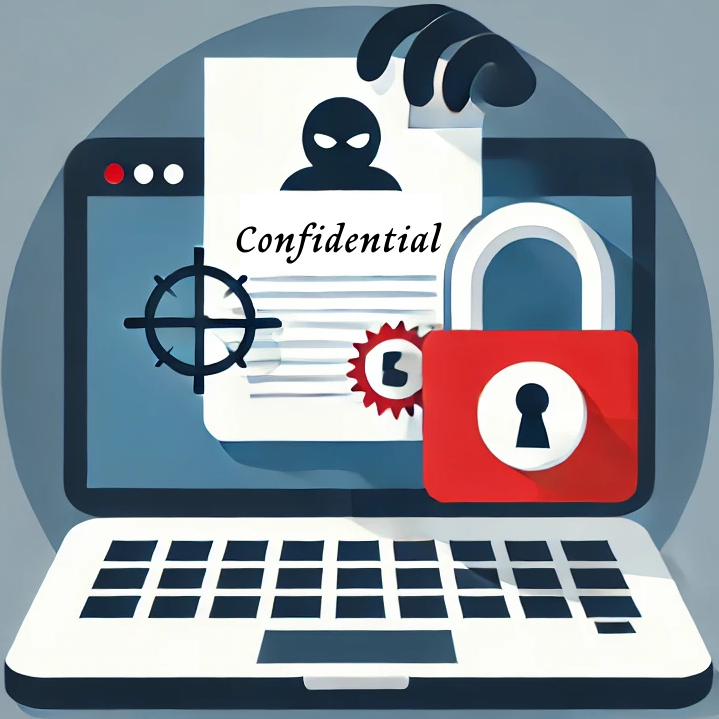
<style>
.page{position:relative;width:719px;height:719px}
.page>*{position:absolute;margin:0}
.t1{font:42px "NewtSerifDemi-Italic";color:#000000}
</style>
<div class="page">
<p class="t1" style="left:236px;top:222px;width:206px;height:42px">Confidential</p>
</div>
